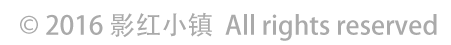
<style>
.page{position:relative;width:451px;height:45px;background:#ffffff}
.page>*{position:absolute;margin:0}
.t1{font:26px "AdobeHeitiStd-Regular";color:#aaaaaa}
</style>
<div class="page">
<p class="t1" style="left:20px;top:12px;width:417px;height:29px">© 2016 影红小镇  All rights reserved</p>
</div>
